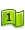
<style>
.page{position:relative;width:25px;height:30px;background:#ffffff}
.page>*{position:absolute;margin:0}
.t1{font:11px "Tahoma";color:#000001}
</style>
<div class="page">
<p class="t1" style="left:7px;top:13px;width:5px;height:8px">1</p>
</div>
